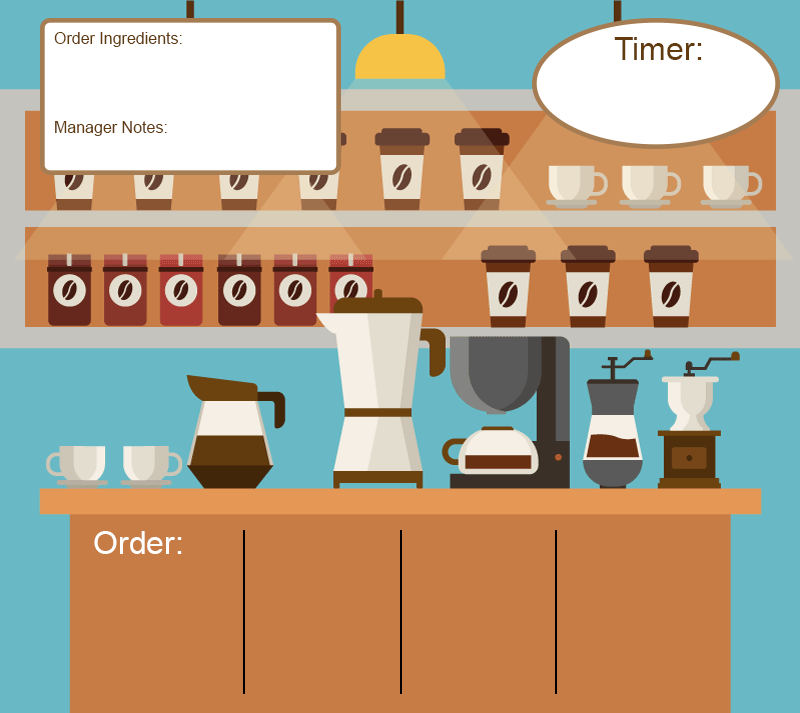
<style>
.page{position:relative;width:800px;height:713px;background:#c77c46}
.page>*{position:absolute;margin:0}
.t1{font:16px "ArialMT";color:#613a0d}
.t2{font:32px "ArialMT";color:#613a0d}
.t3{font:32px "ArialMT";color:#ffffff}
</style>
<div class="page">
<p class="t1" style="left:54px;top:32px;width:128px;height:15px">Order Ingredients:</p>
<p class="t2" style="left:614px;top:37px;width:88px;height:23px">Timer:</p>
<p class="t1" style="left:55px;top:121px;width:112px;height:15px">Manager Notes:</p>
<p class="t3" style="left:94px;top:531px;width:88px;height:23px">Order:</p>
</div>
